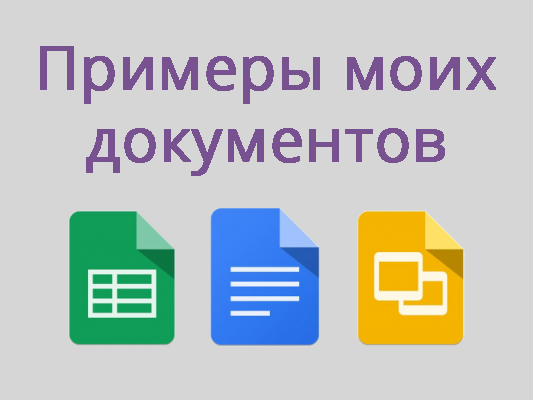
<style>
.page{position:relative;width:533px;height:400px;background:#d6d6d6}
.page>*{position:absolute;margin:0}
.t1{font:60px "OpenSans";color:#785290;font-weight:bold}
</style>
<div class="page">
<p class="t1" style="left:40px;top:46px;width:456px;height:130px;text-align:center">Примеры моих<br>документов</p>
</div>
